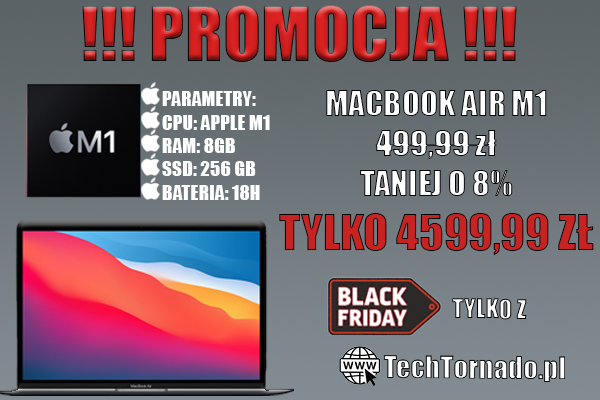
<style>
.page{position:relative;width:600px;height:400px}
.page>*{position:absolute;margin:0}
.t1{font:70.4px "Impact"}
.t2{font:19.5px "Impact";color:#fefefe}
.t3{font:33px "Impact";color:#ffffff}
.t4{font:45.5px "Impact";color:#c82323;text-transform:uppercase}
</style>
<div class="page">
<p class="t1" style="left:82px;top:5px;width:435px;height:57px">!!! PROMOCJA !!!</p>
<p class="t2" style="left:162px;top:91px;width:108px;height:109px">PARAMETRY:<br>CPU: APPLE M1<br>RAM: 8GB<br>SSD: 256 GB<br>BATERIA: 18H</p>
<p class="t3" style="left:279px;top:90px;width:315px;height:165px;text-align:center">MACBOOK AIR M1<br>499,99 zł<br>TANIEJ O 8%<br><span class="t4">TYLKO 4599,99 zł</span></p>
</div>
